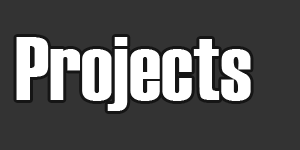
<style>
.page{position:relative;width:300px;height:150px;background:#333333}
.page>*{position:absolute;margin:0}
.t1{font:90px "Haettenschweiler";color:#ffffff}
</style>
<div class="page">
<p class="t1" style="left:16px;top:37px;width:235px;height:74px">Projects</p>
</div>
